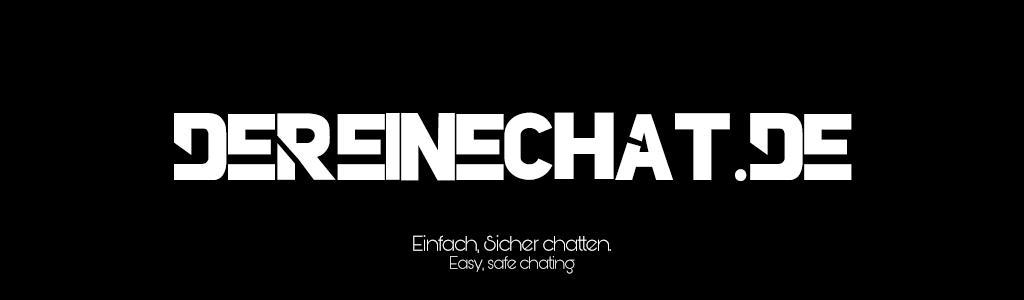
<style>
.page{position:relative;width:1024px;height:300px;background:#000000}
.page>*{position:absolute;margin:0}
.t1{font:93.6px "DiscordFont_by_Marvin";letter-spacing:-0.01em;color:#ffffff}
.t2{font:93.6px "MyriadPro-Regular";letter-spacing:-0.01em;color:#ffffff}
.t3{font:22.6px "BunyaPERSONAL-Light";letter-spacing:-0.01em;color:#ffffff}
.t4{font:18.6px "BunyaPERSONAL-Light";letter-spacing:-0.01em;color:#ffffff}
</style>
<div class="page">
<p class="t1" style="left:174px;top:112px;width:678px;height:69px">DEREINECHAT<span class="t2">.</span>DE</p>
<p class="t3" style="left:413px;top:235px;width:198px;height:18px">Einfach, Sicher chatten.</p>
<p class="t4" style="left:450px;top:256px;width:125px;height:18px">Easy, safe chating</p>
</div>
